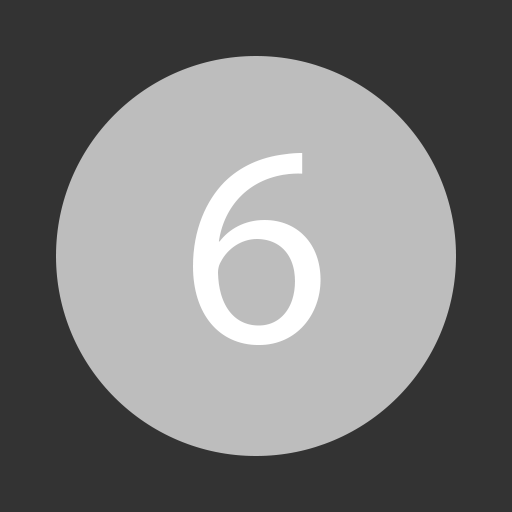
<style>
.page{position:relative;width:512px;height:512px;background:#333333}
.page>*{position:absolute;margin:0}
.t1{font:286px "MyriadPro-Regular";color:#ffffff}
</style>
<div class="page">
<p class="t1" style="left:193px;top:153px;width:128px;height:192px">6</p>
</div>
